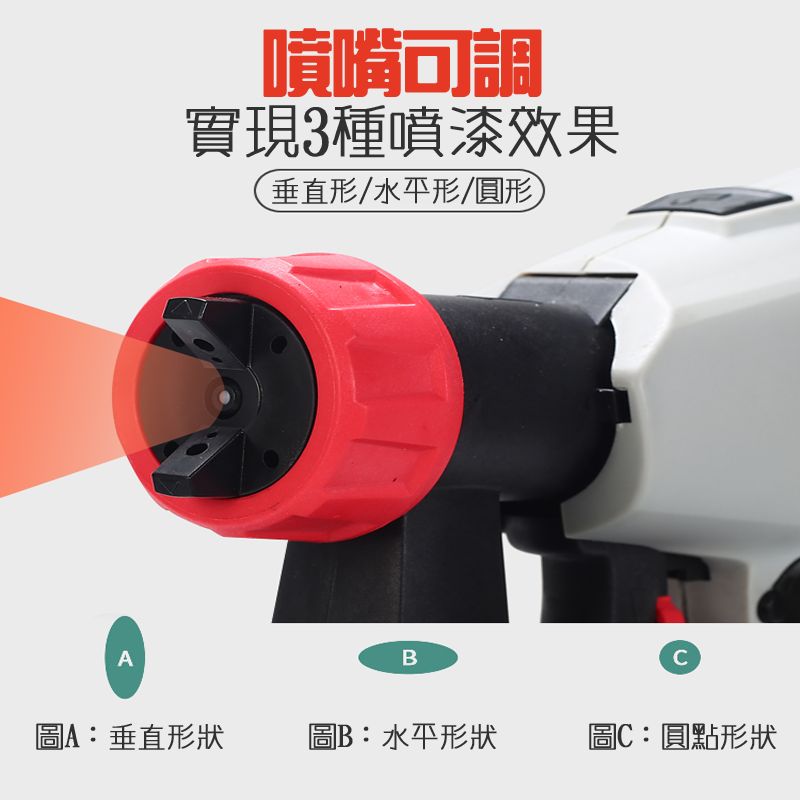
<style>
.page{position:relative;width:800px;height:800px;background:#ebebeb}
.page>*{position:absolute;margin:0}
.t1{font:72px "HanWangZonYi";letter-spacing:-0.05em;color:#e53825;font-weight:bold}
.t2{font:60px "winman-tun33014";letter-spacing:-0.05em;color:#313131;font-weight:bold}
.t3{font:30px "winman-tun33014";letter-spacing:-0.05em;color:#303030;font-weight:bold}
</style>
<div class="page">
<p class="t1" style="left:263px;top:28px;width:279px;height:69px">噴嘴可調</p>
<p class="t2" style="left:186px;top:105px;width:433px;height:53px">實現3種噴漆效果</p>
<p class="t3" style="left:272px;top:176px;width:260px;height:29px">垂直形/水平形/圓形</p>
<p class="t3" style="left:36px;top:723px;width:188px;height:27px">圖A：垂直形狀</p>
<p class="t3" style="left:309px;top:723px;width:188px;height:27px">圖B：水平形狀</p>
<p class="t3" style="left:589px;top:723px;width:188px;height:27px">圖C：圓點形狀</p>
</div>
